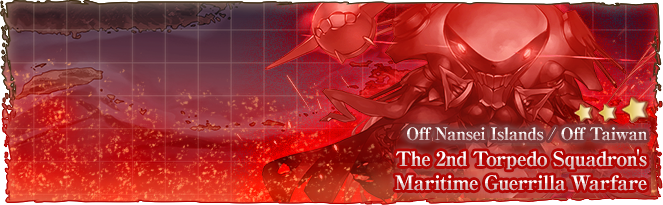
<style>
.page{position:relative;width:663px;height:205px}
.page>*{position:absolute;margin:0}
.t1{font:17px "RyuminPro-ExBold";letter-spacing:-0.04em}
.t2{font:20px "RyuminPro-ExBold";letter-spacing:-0.04em}
</style>
<div class="page">
<p class="t1" style="left:407px;top:127px;width:240px;height:14px">Off Nansei Islands / Off Taiwan</p>
<p class="t2" style="left:396px;top:149px;width:251px;height:21px">The 2nd Torpedo Squadron＇s</p>
<p class="t2" style="left:395px;top:175px;width:252px;height:16px">Maritime Guerrilla Warfare</p>
</div>
